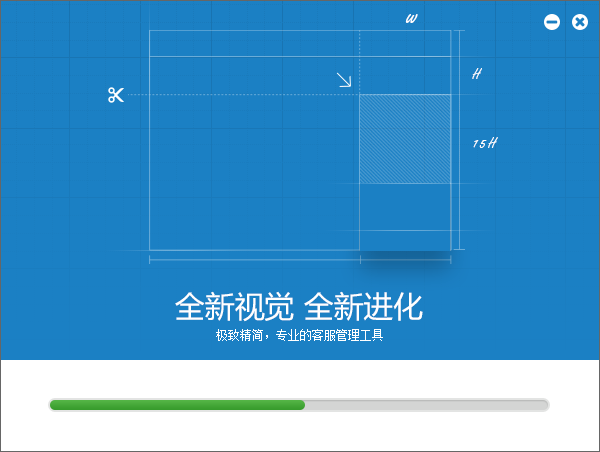
<style>
.page{position:relative;width:600px;height:452px;background:#1b80c4}
.page>*{position:absolute;margin:0}
.t1{font:30px "FreestyleScript-Regular";letter-spacing:0.1em;color:#ffffff}
.t2{font:16px "FreestyleScript-Regular";letter-spacing:0.1em;color:#ffffff}
.t3{font:30px "MicrosoftYaHei";color:#ffffff}
.t4{font:12px "SimSun";color:#ffffff}
</style>
<div class="page">
<p class="t1" style="left:405px;top:14px;width:13px;height:9px">w</p>
<p class="t2" style="left:472px;top:68px;width:10px;height:11px">H</p>
<p class="t2" style="left:473px;top:137px;width:25px;height:11px">15H</p>
<p class="t3" style="left:175px;top:291px;width:248px;height:31px">全新视觉 全新进化</p>
<p class="t4" style="left:216px;top:329px;width:167px;height:12px">极致精简，专业的客服管理工具</p>
</div>
